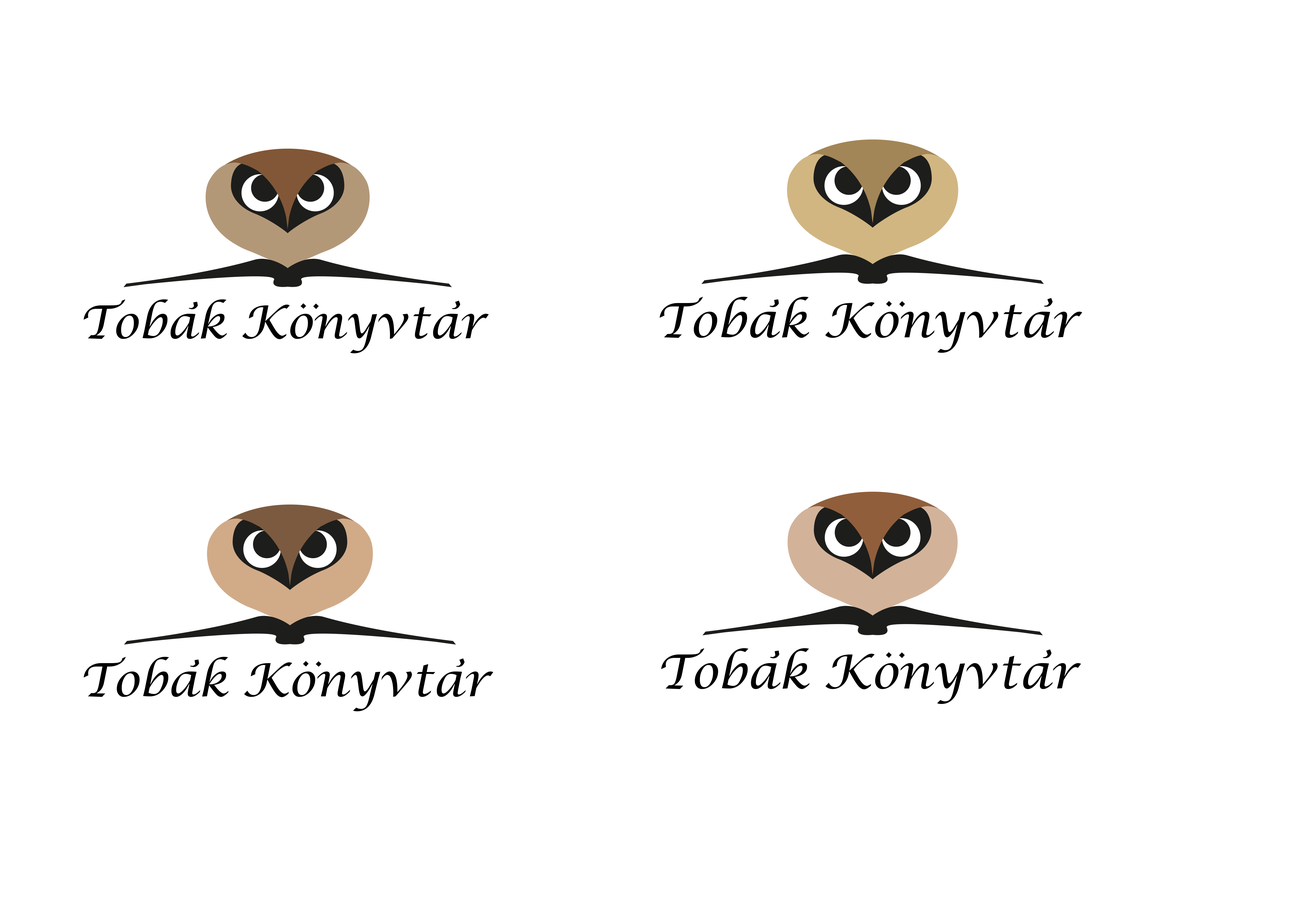
<style>
.page{position:relative;width:1299px;height:918px;background:#ffffff}
.page>*{position:absolute;margin:0}
.t1{font:45.5px "LucidaCalligraphy-Italic";color:#000000}
.t2{font:32.1px "LucidaCalligraphy-Italic";color:#000000}
.t3{font:47.5px "LucidaCalligraphy-Italic";color:#000000}
.t4{font:33.5px "LucidaCalligraphy-Italic";color:#000000}
.t5{font:47.2px "LucidaCalligraphy-Italic";color:#000000}
.t6{font:33.3px "LucidaCalligraphy-Italic";color:#000000}
.t7{font:46px "LucidaCalligraphy-Italic";color:#000000}
.t8{font:32.5px "LucidaCalligraphy-Italic";color:#000000}
</style>
<div class="page">
<p class="t1" style="left:83px;top:299px;width:406px;height:54px">Tobak Konyvtar</p>
<p class="t2" style="left:188px;top:302px;width:10px;height:7px">,</p>
<p class="t2" style="left:300px;top:303px;width:19px;height:6px">:</p>
<p class="t2" style="left:451px;top:300px;width:9px;height:9px">,</p>
<p class="t3" style="left:660px;top:297px;width:422px;height:56px">Tobak Konyvtar</p>
<p class="t4" style="left:769px;top:299px;width:10px;height:8px">,</p>
<p class="t4" style="left:886px;top:301px;width:19px;height:6px">:</p>
<p class="t4" style="left:1043px;top:298px;width:10px;height:9px">,</p>
<p class="t5" style="left:661px;top:648px;width:420px;height:56px">Tobak Konyvtar</p>
<p class="t6" style="left:770px;top:651px;width:9px;height:7px">,</p>
<p class="t6" style="left:886px;top:652px;width:19px;height:6px">:</p>
<p class="t6" style="left:1042px;top:649px;width:10px;height:9px">,</p>
<p class="t7" style="left:83px;top:657px;width:410px;height:54px">Tobak Konyvtar</p>
<p class="t8" style="left:190px;top:660px;width:9px;height:7px">,</p>
<p class="t8" style="left:303px;top:661px;width:18px;height:6px">:</p>
<p class="t8" style="left:456px;top:658px;width:9px;height:9px">,</p>
</div>
